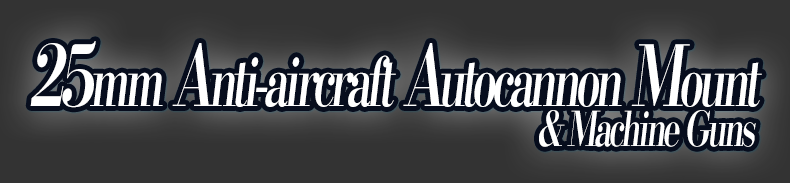
<style>
.page{position:relative;width:790px;height:183px;background:#333333}
.page>*{position:absolute;margin:0}
.t1{font:48px/40px "KochoStd-Heavy";letter-spacing:-0.1em;color:#ffffff;font-style:italic;scale:0.67 1}
.t2{font:84px/40px "KochoStd-Heavy";letter-spacing:-0.1em;color:#ffffff;font-style:italic;scale:0.67 1}
.t3{font:67.2px/40px "KochoStd-Heavy";letter-spacing:-0.1em;color:#ffffff;font-style:italic;scale:0.67 1}
</style>
<div class="page">
<p class="t1" style="left:30px;top:41px;width:732px;height:106px;text-align:center"><span class="t2">25</span><span class="t3">mm</span><span class="t2"> A</span><span class="t3">nti-aircraft</span><span class="t2"> A</span><span class="t3">utocannon</span><span class="t2"> M</span><span class="t3">ount<br></span>              &amp; Machine Guns</p>
</div>
